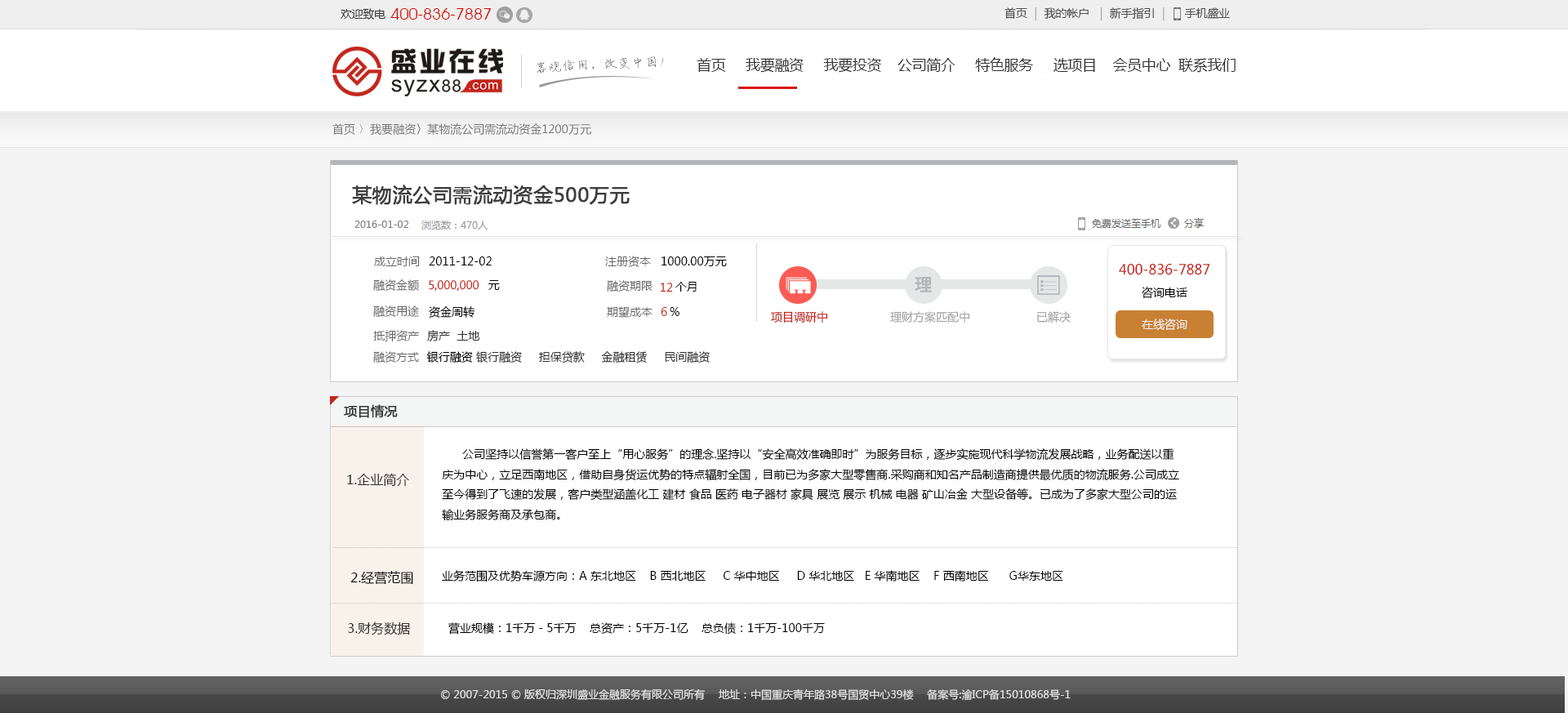
<style>
.page{position:relative;width:1568px;height:713px;background:#ffffff}
.page>*{position:absolute;margin:0}
.t1{font:11.4px "MicrosoftYaHei";letter-spacing:-0.02em;color:#333333}
.t2{font:16.5px "AvantGardeITCbyBT-Book";letter-spacing:-0.02em;color:#d60c00}
.t3{font:11.4px "MicrosoftYaHei";letter-spacing:-0.02em;color:#505050}
.t4{font:11.4px "MicrosoftYaHei";color:#757574}
.t5{font:11.4px "SimSun";color:#757574}
.t6{font:19.6px "MicrosoftYaHei";color:#3f3f3f;font-weight:bold}
.t7{font:9.8px "MicrosoftYaHei";color:#808080}
.t8{font:11.4px "MicrosoftYaHei";color:#666666}
.t9{font:11.4px "MicrosoftYaHei";color:#000000}
.t10{font:13.9px "MicrosoftYaHei";color:#c4261d}
.t11{font:11.4px "MicrosoftYaHei";color:#c4261b}
.t12{font:18.1px "HYb2gj";color:#b2b5ba}
.t13{font:11.4px "MicrosoftYaHei";color:#c6261a}
.t14{font:11.4px "MicrosoftYaHei";color:#c3261d}
.t15{font:11.4px "MicrosoftYaHei";color:#c4261d}
.t16{font:11.4px "MicrosoftYaHei";color:#a8a8a8}
.t17{font:11.4px "MicrosoftYaHei";color:#333333}
.t18{font:11.4px "MicrosoftYaHei";color:#efefef}
.t19{font:13.1px "MicrosoftYaHei";color:#313232;font-weight:bold}
.t20{font:13.1px "MicrosoftYaHei";color:#32312f}
.t21{font:13.1px "MicrosoftYaHei";color:#000000}
.t22{font:10.6px "MicrosoftYaHei";color:#e3e3e3}
</style>
<div class="page">
<p class="t1" style="left:341px;top:8px;width:44px;height:12px">欢迎致电</p>
<p class="t2" style="left:390px;top:8px;width:101px;height:12px">400-836-7887</p>
<p class="t3" style="left:1004px;top:7px;width:226px;height:13px">首页 ｜ 我的帐户  ｜ 新手指引 ｜     手机盛业</p>
<p class="t4" style="left:332px;top:123px;width:259px;height:12px">首页 <span class="t5">〉</span>我要融资〉某物流公司需流动资金1200万元</p>
<p class="t6" style="left:352px;top:185px;width:278px;height:20px">某物流公司需流动资金500万元</p>
<p class="t7" style="left:354px;top:220px;width:55px;height:8px">2016-01-02</p>
<p class="t8" style="left:374px;top:256px;width:46px;height:10px">成立时间</p>
<p class="t9" style="left:429px;top:256px;width:63px;height:9px">2011-12-02</p>
<p class="t8" style="left:605px;top:256px;width:46px;height:11px">注册资本</p>
<p class="t9" style="left:662px;top:256px;width:65px;height:10px">1000.00万元</p>
<p class="t10" style="left:1119px;top:263px;width:91px;height:12px">400-836-7887</p>
<p class="t8" style="left:373px;top:279px;width:46px;height:12px">融资金额</p>
<p class="t11" style="left:429px;top:280px;width:50px;height:12px">5,000,000</p>
<p class="t9" style="left:488px;top:280px;width:12px;height:10px">元</p>
<p class="t8" style="left:607px;top:280px;width:46px;height:12px">融资期限</p>
<p class="t9" style="left:675px;top:282px;width:22px;height:10px">个月</p>
<p class="t12" style="left:915px;top:277px;width:17px;height:15px">理</p>
<p class="t13" style="left:661px;top:283px;width:12px;height:9px">12</p>
<p class="t9" style="left:1142px;top:287px;width:45px;height:12px">咨询电话</p>
<p class="t8" style="left:373px;top:305px;width:46px;height:12px">融资用途</p>
<p class="t9" style="left:429px;top:306px;width:46px;height:12px">资金周转</p>
<p class="t8" style="left:607px;top:306px;width:46px;height:12px">期望成本</p>
<p class="t14" style="left:661px;top:307px;width:6px;height:9px">6</p>
<p class="t9" style="left:670px;top:307px;width:9px;height:9px">%</p>
<p class="t15" style="left:771px;top:311px;width:57px;height:12px">项目调研中</p>
<p class="t16" style="left:890px;top:311px;width:80px;height:12px">理财方案匹配中</p>
<p class="t16" style="left:1036px;top:311px;width:35px;height:12px">已解决</p>
<p class="t8" style="left:373px;top:330px;width:47px;height:11px">抵押资产</p>
<p class="t17" style="left:427px;top:330px;width:53px;height:12px">房产  土地</p>
<p class="t18" style="left:1142px;top:318px;width:45px;height:13px">在线咨询</p>
<p class="t8" style="left:373px;top:351px;width:46px;height:12px">融资方式</p>
<p class="t17" style="left:426px;top:351px;width:284px;height:12px"><span class="t9">银行融资 </span>银行融资     担保贷款     金融租赁     民间融资</p>
<p class="t19" style="left:344px;top:404px;width:54px;height:14px">项目情况</p>
<p class="t9" style="left:442px;top:448px;width:737px;height:73px">公司坚持以信誉第一客户至上“用心服务”的理念.坚持以“安全高效准确即时”为服务目标，逐步实施现代科学物流发展战略，业务配送以重庆为中心，立足西南地区，借助自身货运优势的特点辐射全国，目前已为多家大型零售商.采购商和知名产品制造商提供最优质的物流服务.公司成立至今得到了飞速的发展，客户类型涵盖化工 建材 食品 医药 电子器材 家具 展览 展示 机械 电器 矿山冶金 大型设备等。已成为了多家大型公司的运输业务服务商及承包商。</p>
<p class="t20" style="left:347px;top:473px;width:62px;height:14px">1.企业简介</p>
<p class="t21" style="left:350px;top:571px;width:63px;height:14px">2.经营范围</p>
<p class="t9" style="left:442px;top:570px;width:621px;height:12px">业务范围及优势车源方向：A 东北地区    B 西北地区     C 华中地区     D 华北地区   E 华南地区    F 西南地区      G华东地区</p>
<p class="t20" style="left:348px;top:621px;width:63px;height:14px">3.财务数据</p>
<p class="t9" style="left:448px;top:622px;width:377px;height:13px">营业规模：1千万－5千万    总资产：5千万-1亿    总负债：1千万-100千万</p>
<p class="t22" style="left:441px;top:688px;width:630px;height:13px">© 2007-2015 © 版权归深圳盛业金融服务有限公司所有　 地址：中国重庆青年路38号国贸中心39楼 　备案号:渝ICP备15010868号-1</p>
</div>
